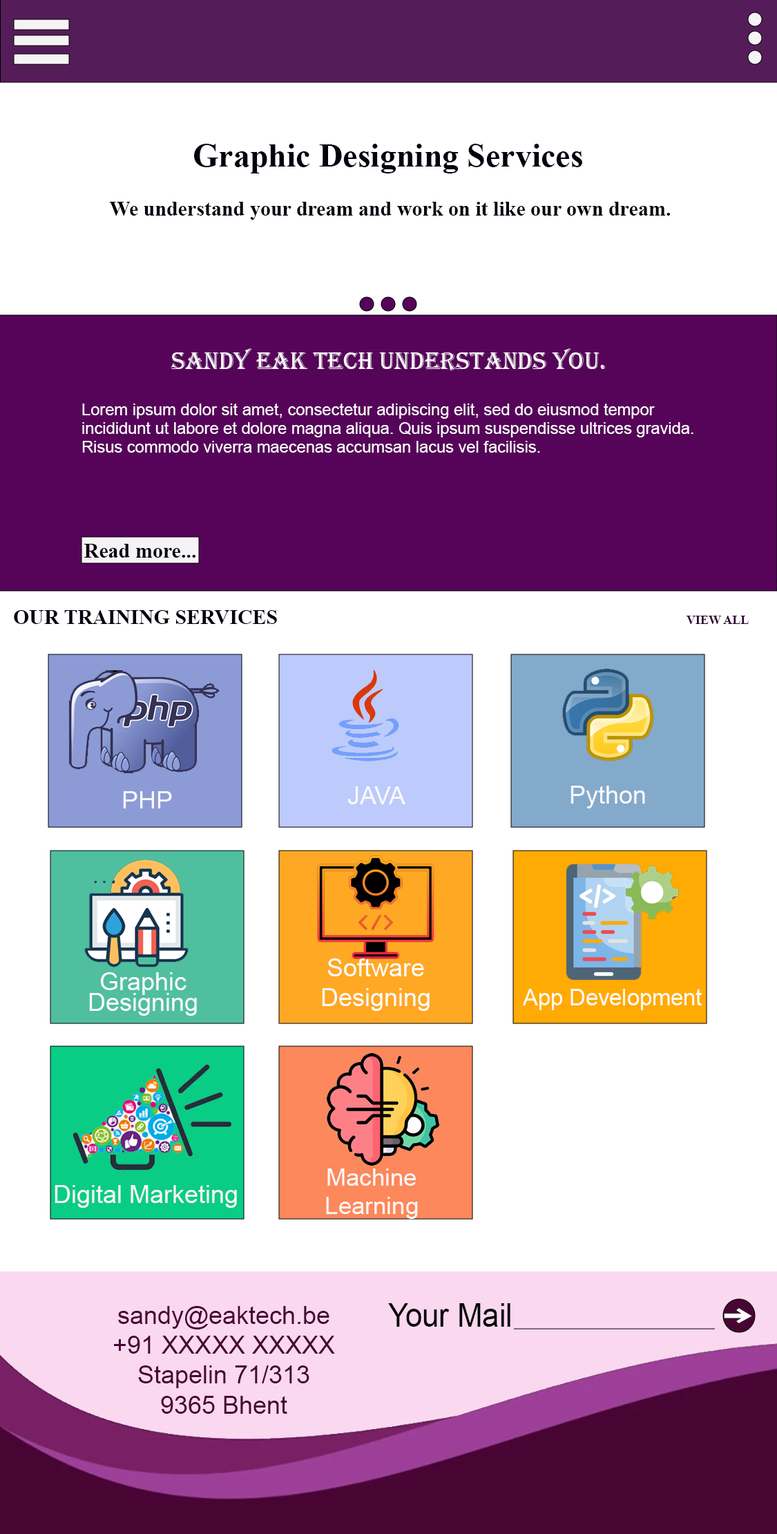
<style>
.page{position:relative;width:777px;height:1534px;background:#ffffff}
.page>*{position:absolute;margin:0}
.t1{font:33.2px "TimesNewRomanPS-BoldMT";color:#01020f}
.t2{font:20.7px "TimesNewRomanPS-BoldMT";color:#01020f}
.t3{font:24.9px "Algerian";color:#fdfbfb}
.t4{font:15.6px "ArialMT";color:#fdfbfb;scale:1.05 1}
.t5{font:12.4px "TimesNewRomanPS-BoldMT";color:#2f0231}
.t6{font:24.9px "ArialMT";color:#fbf9f9}
.t7{font:23.2px "ArialMT";color:#fbf9f9;scale:1.07 1}
.t8{font:24.9px "ArialMT";color:#fcfafa}
.t9{font:24.9px/20.7px "ArialMT";color:#fbfafa}
.t10{font:22.5px "ArialMT";color:#fcf9f9}
.t11{font:23.5px "ArialMT";color:#fbf6f6}
.t12{font:24.9px "ArialMT";color:#faf7f7}
.t13{font:24.9px "ArialMT";color:#480534}
.t14{font:32.5px "ArialMT";color:#060606;scale:0.93 1}
</style>
<div class="page">
<p class="t1" style="left:194px;top:144px;width:388px;height:29px">Graphic Designing Services</p>
<p class="t2" style="left:109px;top:202px;width:562px;height:18px">We understand your dream and work on it like our own dream.</p>
<p class="t3" style="left:171px;top:348px;width:434px;height:23px">Sandy Eak Tech Understands You.</p>
<p class="t4" style="left:82px;top:404px;width:612px;height:49px">Lorem ipsum dolor sit amet, consectetur adipiscing elit, sed do eiusmod tempor incididunt ut labore et dolore magna aliqua. Quis ipsum suspendisse ultrices gravida. Risus commodo viverra maecenas accumsan lacus vel facilisis.</p>
<p class="t2" style="left:84px;top:544px;width:112px;height:14px">Read more...</p>
<p class="t2" style="left:14px;top:610px;width:263px;height:14px">OUR TRAINING SERVICES</p>
<p class="t5" style="left:687px;top:616px;width:62px;height:8px">VIEW ALL</p>
<p class="t6" style="left:571px;top:786px;width:74px;height:22px">Python</p>
<p class="t7" style="left:123px;top:791px;width:49px;height:17px">PHP</p>
<p class="t6" style="left:348px;top:786px;width:58px;height:18px">JAVA</p>
<p class="t8" style="left:322px;top:958px;width:108px;height:53px;text-align:center">Software Designing</p>
<p class="t9" style="left:89px;top:972px;width:108px;height:44px;text-align:center">Graphic Designing</p>
<p class="t10" style="left:523px;top:989px;width:179px;height:21px">App Development</p>
<p class="t11" style="left:326px;top:1168px;width:92px;height:51px;text-align:center">Machine Learning</p>
<p class="t12" style="left:55px;top:1185px;width:182px;height:23px">Digital Marketing</p>
<p class="t13" style="left:114px;top:1306px;width:221px;height:108px;text-align:center">sandy@eaktech.be<br>+91 XXXXX XXXXX<br>Stapelin 71/313<br>9365 Bhent</p>
<p class="t14" style="left:388px;top:1303px;width:123px;height:24px">Your Mail</p>
</div>
